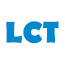
<style>
.page{position:relative;width:65px;height:65px;background:#ffffff}
.page>*{position:absolute;margin:0}
.t1{font:30.7px "BerlinSansFB-Bold";color:#0088cc}
</style>
<div class="page">
<p class="t1" style="left:6px;top:21px;width:53px;height:23px">LCT</p>
</div>
